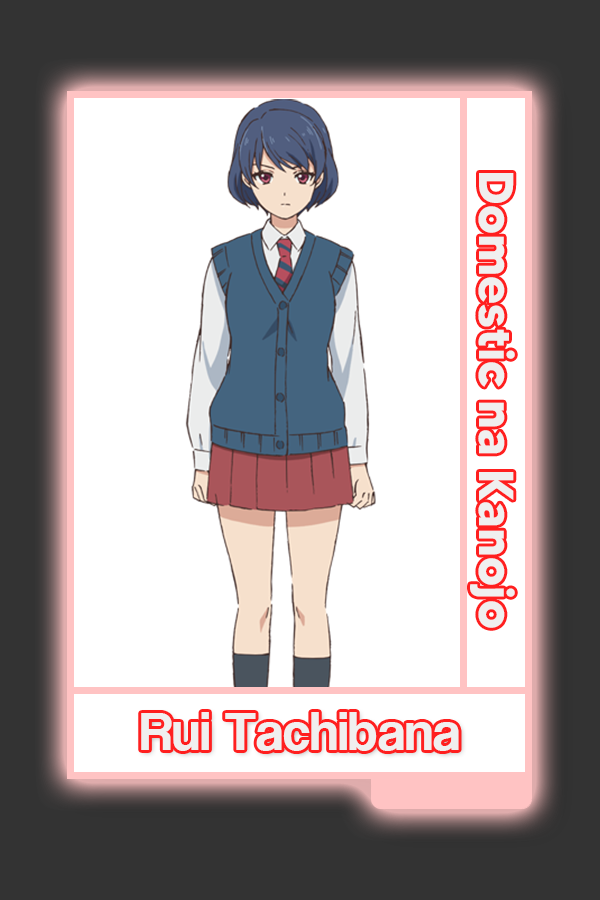
<style>
.page{position:relative;width:600px;height:900px;background:#ffffff}
.page>*{position:absolute;margin:0}
.t1{font:48.8px "MADETOMMY-Bold";color:#f0efef}
.t2{font:56.3px "CoolveticaRg-Regular";color:#f0efef}
</style>
<div class="page">
<p class="t1" style="left:470px;top:173px;width:45px;height:455px;rotate:90deg">Domestic na Kanojo</p>
<p class="t2" style="left:141px;top:712px;width:318px;height:39px">Rui Tachibana</p>
</div>
